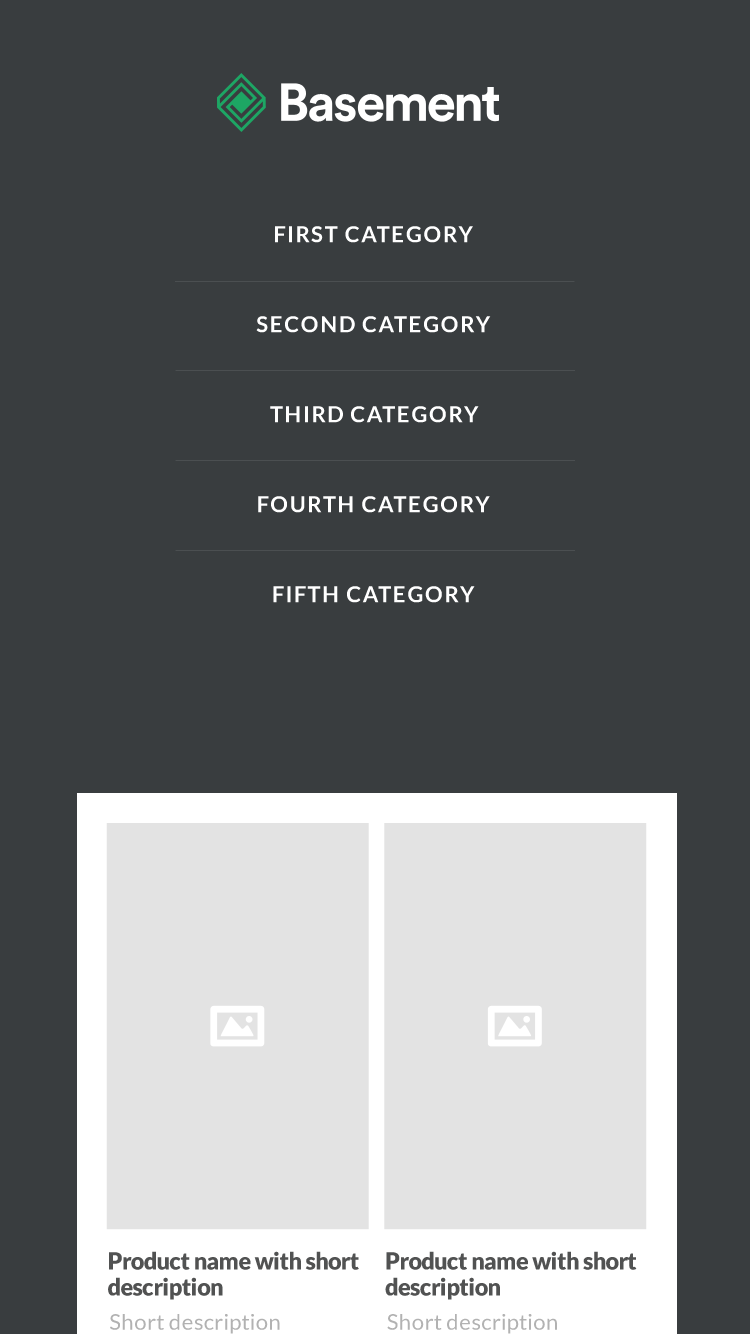
<style>
.page{position:relative;width:750px;height:1334px;background:#393d3f}
.page>*{position:absolute;margin:0}
.t1{font:22px "Lato-Bold";letter-spacing:0.07em;color:#ffffff}
.t2{font:23.4px/25.8px "Lato-Black";letter-spacing:-0.02em;color:#515252}
.t3{font:21.9px "Lato-Regular";letter-spacing:0.02em;color:#b2b2b2}
</style>
<div class="page">
<p class="t1" style="left:275px;top:226px;width:198px;height:17px">FIRST CATEGORY</p>
<p class="t1" style="left:256px;top:316px;width:235px;height:17px">SECOND CATEGORY</p>
<p class="t1" style="left:270px;top:406px;width:209px;height:17px">THIRD CATEGORY</p>
<p class="t1" style="left:258px;top:496px;width:232px;height:17px">FOURTH CATEGORY</p>
<p class="t1" style="left:273px;top:586px;width:202px;height:17px">FIFTH CATEGORY</p>
<p class="t2" style="left:108px;top:1251px;width:251px;height:49px">Product name with short<br>description</p>
<p class="t2" style="left:385px;top:1251px;width:252px;height:49px">Product name with short<br>description</p>
<p class="t3" style="left:110px;top:1314px;width:170px;height:20px">Short description</p>
<p class="t3" style="left:387px;top:1314px;width:170px;height:20px">Short description</p>
</div>
